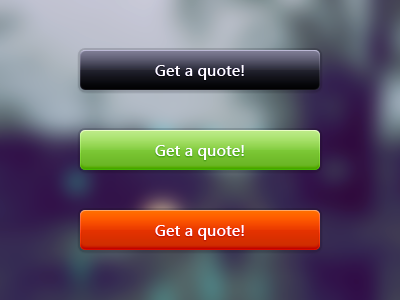
<style>
.page{position:relative;width:400px;height:300px}
.page>*{position:absolute;margin:0}
.t1{font:16px "SegoeUI-SemiBold";color:#ffffff}
</style>
<div class="page">
<p class="t1" style="left:155px;top:65px;width:89px;height:15px">Get a quote!</p>
<p class="t1" style="left:155px;top:145px;width:89px;height:15px">Get a quote!</p>
<p class="t1" style="left:155px;top:225px;width:89px;height:15px">Get a quote!</p>
</div>
